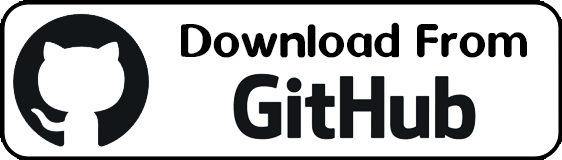
<style>
.page{position:relative;width:562px;height:160px;background:#ffffff}
.page>*{position:absolute;margin:0}
.t1{font:54px "Dyuthi-Regular";color:#000000}
</style>
<div class="page">
<p class="t1" style="left:181px;top:22px;width:346px;height:36px">Download From</p>
</div>
